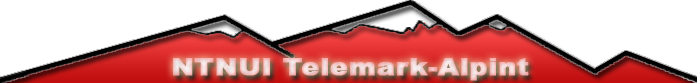
<style>
.page{position:relative;width:697px;height:83px;background:#ffffff}
.page>*{position:absolute;margin:0}
.t1{font:24px "Arial-Black";font-weight:bold;scale:1.13 1}
</style>
<div class="page">
<p class="t1" style="left:173px;top:58px;width:356px;height:23px">NTNUI Telemark-Alpint</p>
</div>
